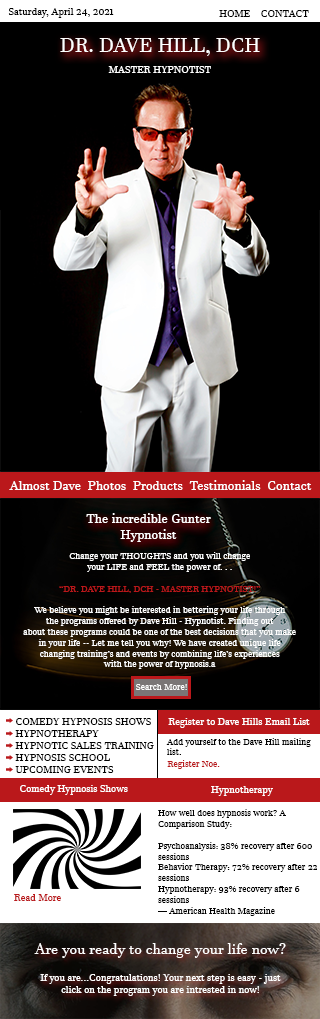
<style>
.page{position:relative;width:320px;height:1019px;background:#000000}
.page>*{position:absolute;margin:0}
.t1{font:10px "JavaneseText";color:#000000}
.t2{font:20px "JavaneseText";color:#ffffff}
.t3{font:10px "JavaneseText";color:#ffffff}
.t4{font:13px "JavaneseText";color:#ffffff}
.t5{font:9px "JavaneseText";color:#ffffff}
.t6{font:9px "JavaneseText";color:#ba181b}
.t7{font:9px "JavaneseText";color:#000000}
.t8{font:10px "JavaneseText";color:#ba181b}
.t9{font:15px "JavaneseText";color:#ffffff}
</style>
<div class="page">
<p class="t1" style="left:8px;top:8px;width:106px;height:10px">Saturday, April 24, 2021</p>
<p class="t1" style="left:219px;top:10px;width:90px;height:7px">HOME    CONTACT</p>
<p class="t2" style="left:60px;top:38px;width:200px;height:18px">DR. DAVE HILL, DCH</p>
<p class="t3" style="left:108px;top:66px;width:103px;height:7px">MASTER HYPNOTIST</p>
<p class="t4" style="left:9px;top:480px;width:303px;height:10px">Almost Dave  Photos  Products  Testimonials  Contact</p>
<p class="t4" style="left:86px;top:513px;width:125px;height:29px;text-align:center">The incredible Gunter<br>Hypnotist</p>
<p class="t5" style="left:23px;top:552px;width:273px;height:117px;text-align:center">Change your THOUGHTS and you will change<br>your LIFE and FEEL the power of. . .<br><br><span class="t6">“DR. DAVE HILL, DCH - MASTER HYPNOTIST!”<br></span><br>We believe you might be interested in bettering your life through<br>the programs offered by Dave Hill - Hypnotist. Finding out<br>about these programs could be one of the best decisions that you make<br>in your life -- Let me tell you why! We have created unique life<br>changing training’s and events by combining life’s experiences<br>with the power of hypnosis.a</p>
<p class="t5" style="left:136px;top:684px;width:51px;height:6px">Search More!</p>
<p class="t1" style="left:15px;top:718px;width:139px;height:55px">COMEDY HYPNOSIS SHOWS<br>HYPNOTHERAPY<br>HYPNOTIC SALES TRAINING<br>HYPNOSIS SCHOOL<br>UPCOMING EVENTS</p>
<p class="t3" style="left:168px;top:718px;width:142px;height:10px">Register to Dave Hills Email List</p>
<p class="t7" style="left:166px;top:738px;width:145px;height:17px">Add yourself to the Dave Hill mailing <br>list.</p>
<p class="t6" style="left:167px;top:760px;width:53px;height:9px">Register Noe.</p>
<p class="t3" style="left:20px;top:785px;width:108px;height:10px">Comedy Hypnosis Shows</p>
<p class="t3" style="left:211px;top:786px;width:62px;height:10px">Hypnotherapy</p>
<p class="t7" style="left:158px;top:809px;width:159px;height:107px">How well does hypnosis work? A Comparison Study:<br> <br>Psychoanalysis: 38% recovery after 600 sessions<br>Behavior Therapy: 72% recovery after 22 sessions<br>Hypnotherapy: 93% recovery after 6 sessions<br>— American Health Magazine</p>
<p class="t8" style="left:14px;top:894px;width:47px;height:7px">Read More</p>
<p class="t3" style="left:34px;top:943px;width:252px;height:53px;text-align:center"><span class="t9">Are you ready to change your life now?<br><br></span>If you are...Congratulations! Your next step is easy - just click on the program you are intrested in now!</p>
</div>
